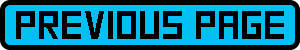
<style>
.page{position:relative;width:300px;height:50px;background:#00bff3}
.page>*{position:absolute;margin:0}
.t1{font:40px "SquareFont";color:#000000}
</style>
<div class="page">
<p class="t1" style="left:16px;top:11px;width:268px;height:28px">PREVIOUS PAGE</p>
</div>
